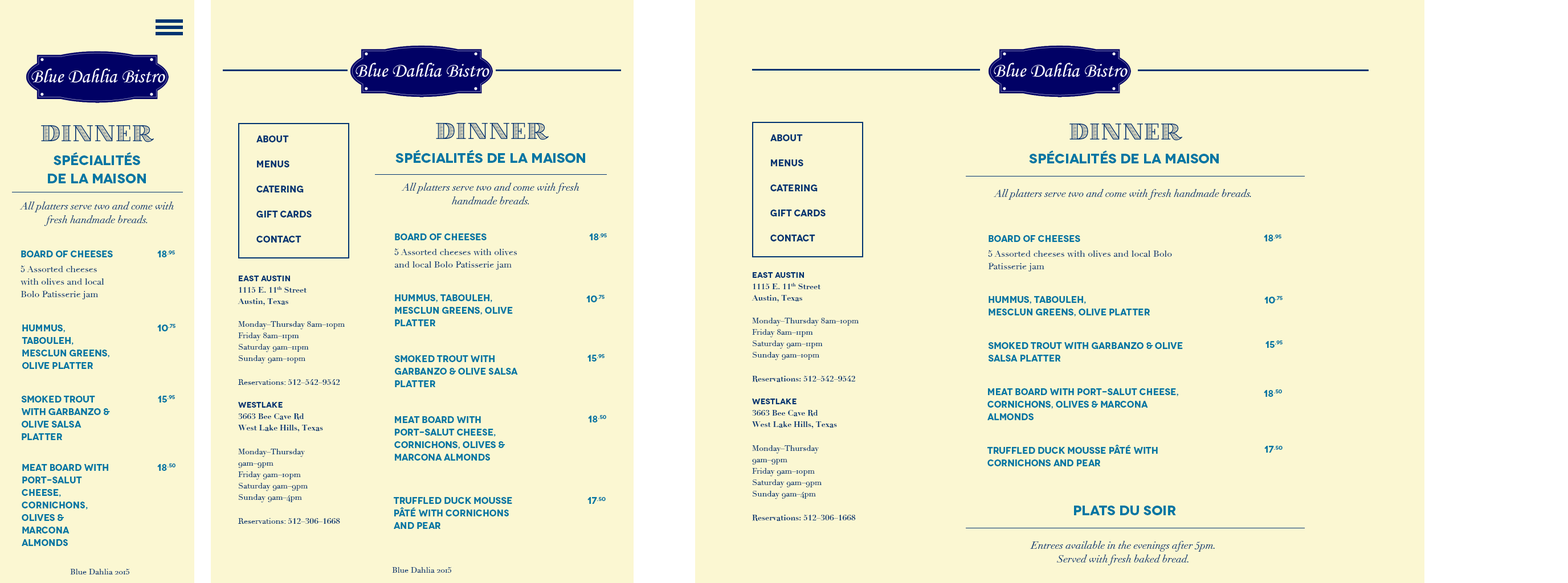
<style>
.page{position:relative;width:1568px;height:583px;background:#fbf7d2}
.page>*{position:absolute;margin:0}
.t1{font:22.8px "VillaDidot";color:#003471}
.t2{font:9.1px/12.5px "Novecentowide-Bold";color:#003471}
.t3{font:13.7px "Novecentowide-Bold";color:#0076a3}
.t4{font:13.7px/18.2px "Novecentowide-Bold";color:#0076a3}
.t5{font:10.3px/13.7px "Didot-Italic";color:#003471}
.t6{font:10.3px "Didot-Italic";color:#003471}
.t7{font:9.1px "Novecentowide-Bold";color:#0076a3}
.t8{font:9.1px/12.5px "Didot";color:#003471}
.t9{font:8px/11.4px "Didot";color:#003471}
.t10{font:8px/11.4px "Novecentowide-Bold";color:#003471}
.t11{font:8px/11.4px "Didot-Bold";color:#003471}
.t12{font:8px/12.5px "Didot-Bold";color:#003471}
.t13{font:9.1px/12.5px "Novecentowide-Bold";color:#0076a3}
.t14{font:8px "Didot";color:#003471}
</style>
<div class="page">
<p class="t1" style="left:41px;top:125px;width:113px;height:17px">DINNER</p>
<p class="t1" style="left:436px;top:123px;width:113px;height:17px">DINNER</p>
<p class="t1" style="left:1069px;top:124px;width:113px;height:17px">DINNER</p>
<p class="t2" style="left:256px;top:136px;width:56px;height:107px">About <br><br>Menus<br><br>Catering<br><br>Gift Cards<br><br>Contact</p>
<p class="t2" style="left:770px;top:134px;width:56px;height:108px">About <br><br>Menus<br><br>Catering<br><br>Gift Cards<br><br>Contact</p>
<p class="t3" style="left:395px;top:150px;width:190px;height:13px">Spécialités de la Maison</p>
<p class="t4" style="left:48px;top:152px;width:98px;height:31px;text-align:center">Spécialités <br>de la Maison</p>
<p class="t3" style="left:1029px;top:150px;width:190px;height:14px">Spécialités de la Maison</p>
<p class="t5" style="left:401px;top:183px;width:178px;height:22px;text-align:center">All platters serve two and come with fresh handmade breads.</p>
<p class="t6" style="left:994px;top:189px;width:257px;height:11px">All platters serve two and come with fresh handmade breads.</p>
<p class="t5" style="left:19px;top:202px;width:155px;height:24px;text-align:center">All platters serve two and come with fresh handmade breads.</p>
<p class="t7" style="left:395px;top:234px;width:92px;height:6px">Board of Cheeses</p>
<p class="t7" style="left:589px;top:234px;width:18px;height:6px">18.95</p>
<p class="t7" style="left:989px;top:235px;width:91px;height:7px">Board of Cheeses</p>
<p class="t7" style="left:1264px;top:235px;width:17px;height:7px">18.95</p>
<p class="t7" style="left:21px;top:251px;width:92px;height:7px">Board of Cheeses</p>
<p class="t7" style="left:157px;top:251px;width:18px;height:7px">18.95</p>
<p class="t8" style="left:394px;top:248px;width:123px;height:22px">5 Assorted cheeses with olives and local Bolo Patisserie jam</p>
<p class="t8" style="left:988px;top:250px;width:184px;height:22px">5 Assorted cheeses with olives and local Bolo Patisserie jam</p>
<p class="t8" style="left:21px;top:266px;width:83px;height:34px">5 Assorted cheeses with olives and local Bolo Patisserie jam</p>
<p class="t9" style="left:238px;top:276px;width:107px;height:248px"><span class="t10">East Austin<br></span><span class="t11">1115 E. 11th Street<br>Austin, Texas <br><br></span>Monday–Thursday 8am–10pm<br>Friday 8am–11pm<br>Saturday 9am–11pm<br>Sunday 9am–10pm<br><br>Reservations: <span class="t12">512–542–9542<br><br></span><span class="t10">Westlake<br></span><span class="t11">3663 Bee Cave Rd<br>West Lake Hills, Texas <br><br></span>Monday–Thursday<br>9am–9pm<br>Friday 9am–10pm<br>Saturday 9am–9pm<br>Sunday 9am–4pm<br><br>Reservations: <span class="t12">512–306–1668</span></p>
<p class="t9" style="left:752px;top:272px;width:107px;height:249px"><span class="t10">East Austin<br></span><span class="t11">1115 E. 11th Street<br>Austin, Texas <br><br></span>Monday–Thursday 8am–10pm<br>Friday 8am–11pm<br>Saturday 9am–11pm<br>Sunday 9am–10pm<br><br><span class="t11">Reservations: </span><span class="t12">512–542–9542<br><br></span><span class="t10">Westlake<br></span><span class="t11">3663 Bee Cave Rd<br>West Lake Hills, Texas <br><br></span>Monday–Thursday<br>9am–9pm<br>Friday 9am–10pm<br>Saturday 9am–9pm<br>Sunday 9am–4pm<br><br><span class="t11">Reservations: </span><span class="t12">512–306–1668</span></p>
<p class="t13" style="left:395px;top:295px;width:118px;height:31px">Hummus, Tabouleh, <br>Mesclun Greens, Olive Platter</p>
<p class="t7" style="left:586px;top:295px;width:19px;height:8px">10.75</p>
<p class="t13" style="left:989px;top:296px;width:161px;height:21px">Hummus, Tabouleh, <br>Mesclun Greens, Olive Platter</p>
<p class="t7" style="left:1264px;top:296px;width:19px;height:8px">10.75</p>
<p class="t13" style="left:22px;top:325px;width:87px;height:44px">Hummus, <br>Tabouleh, <br>Mesclun Greens, Olive Platter</p>
<p class="t7" style="left:157px;top:324px;width:18px;height:8px">10.75</p>
<p class="t7" style="left:1265px;top:341px;width:18px;height:7px">15.95</p>
<p class="t13" style="left:988px;top:342px;width:195px;height:20px">Smoked Trout with Garbanzo &amp; Olive Salsa Platter</p>
<p class="t13" style="left:394px;top:356px;width:124px;height:31px">Smoked Trout with <br>Garbanzo &amp; Olive Salsa <br>Platter</p>
<p class="t7" style="left:587px;top:354px;width:18px;height:8px">15.95</p>
<p class="t13" style="left:987px;top:389px;width:191px;height:31px">Meat Board with Port-Salut cheese, <br>cornichons, olives &amp; Marcona <br>almonds</p>
<p class="t7" style="left:1264px;top:390px;width:18px;height:7px">18.50</p>
<p class="t13" style="left:21px;top:396px;width:89px;height:44px">Smoked Trout with Garbanzo &amp; Olive Salsa <br>Platter</p>
<p class="t7" style="left:158px;top:395px;width:17px;height:8px">15.95</p>
<p class="t13" style="left:394px;top:416px;width:111px;height:45px">Meat Board with Port-Salut cheese, <br>cornichons, olives &amp; <br>Marcona almonds</p>
<p class="t7" style="left:588px;top:415px;width:18px;height:8px">18.50</p>
<p class="t13" style="left:987px;top:444px;width:171px;height:23px">Truffled Duck Mousse Pâté with cornichons and pear</p>
<p class="t7" style="left:1264px;top:446px;width:19px;height:7px">17.50</p>
<p class="t13" style="left:22px;top:464px;width:86px;height:82px">Meat Board with Port-Salut cheese, <br>cornichons, olives &amp; <br>Marcona <br>almonds</p>
<p class="t7" style="left:157px;top:464px;width:18px;height:7px">18.50</p>
<p class="t13" style="left:394px;top:497px;width:118px;height:32px">Truffled Duck Mousse Pâté with cornichons and pear</p>
<p class="t7" style="left:587px;top:497px;width:19px;height:7px">17.50</p>
<p class="t3" style="left:1074px;top:506px;width:102px;height:10px">Plats du soir</p>
<p class="t5" style="left:1030px;top:541px;width:185px;height:25px;text-align:center">Entrees available in the evenings after 5pm.  <br>Served with fresh baked bread.</p>
<p class="t14" style="left:70px;top:569px;width:59px;height:6px">Blue Dahlia 2015</p>
<p class="t14" style="left:392px;top:567px;width:59px;height:6px">Blue Dahlia 2015</p>
</div>
